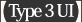
<style>
.page{position:relative;width:82px;height:22px;background:#333333}
.page>*{position:absolute;margin:0}
.t1{font:18px "HeiseiMinStd-W7";letter-spacing:-0.08em;color:#ffffff}
</style>
<div class="page">
<p class="t1" style="left:8px;top:4px;width:66px;height:18px">Type 3 UI</p>
</div>
